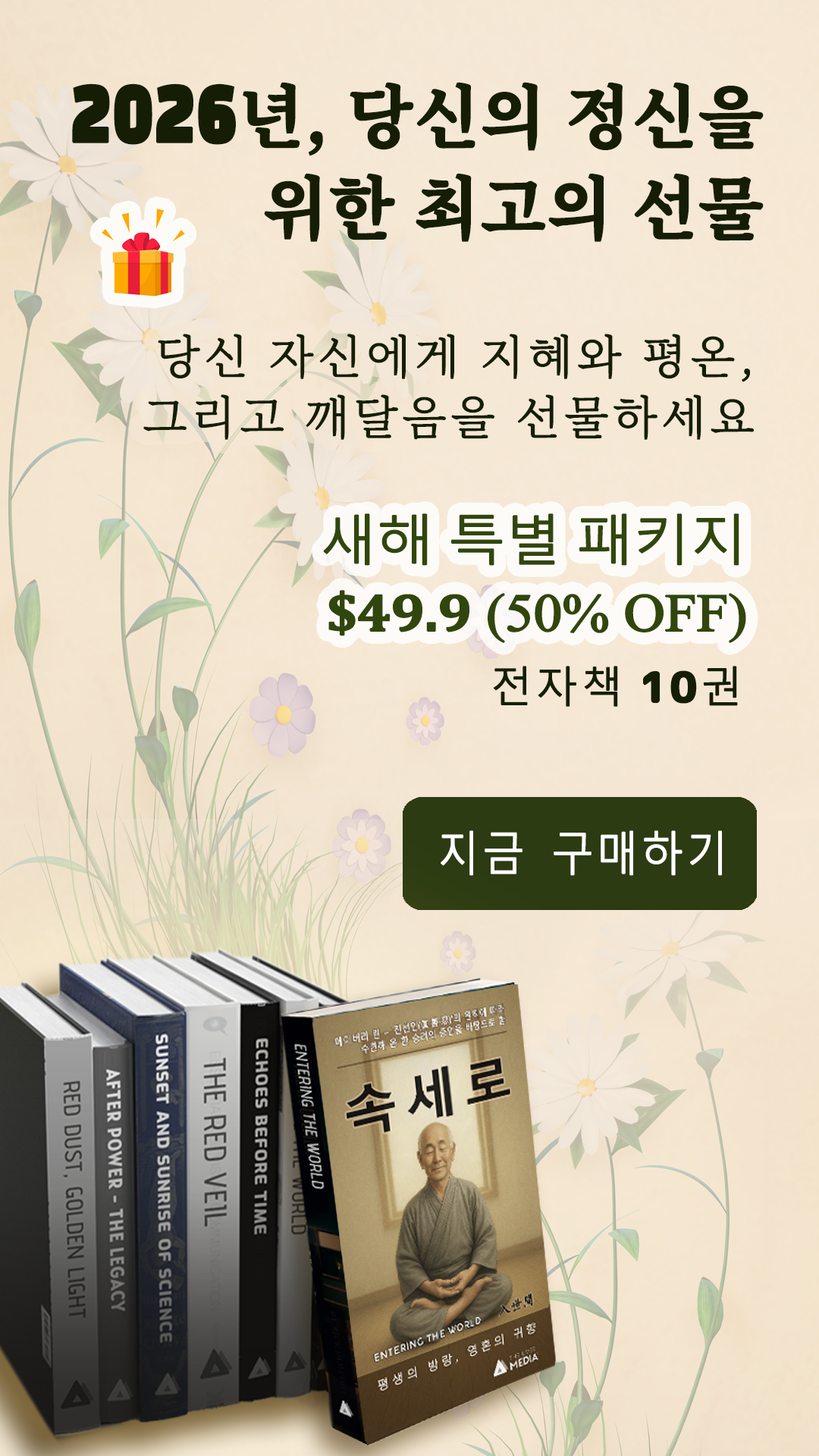
<style>
.page{position:relative;width:819px;height:1456px}
.page>*{position:absolute;margin:0}
.t1{font:68.2px/91.2px "NotoSerifKR-Bold";color:#151e05;font-weight:bold}
.t2{font:88.7px/91.2px "BlackHanSans-Regular";color:#151e05;font-weight:bold;scale:0.75 1}
.t3{font:45.5px/60.7px "NotoSerifKR-ExtraLight";letter-spacing:0.075em;color:#151e05;font-weight:bold}
.t4{font:53.2px/71px "MalgunGothic-Semilight";letter-spacing:-0.025em;color:#31460c;font-weight:bold;scale:1.07 1}
.t5{font:53.2px/71px "Cambria-Bold";letter-spacing:-0.025em;color:#31460c;font-weight:bold;scale:1.07 1}
.t6{font:53.2px/71px "TimesNewRomanPSMT";letter-spacing:-0.025em;color:#31460c;font-weight:bold;scale:1.07 1}
.t7{font:41.7px "MalgunGothic-Semilight";letter-spacing:0.05em;color:#151e05;font-weight:bold}
.t8{font:41.7px "RoundedMplus1c-ExtraBold";letter-spacing:0.05em;color:#151e05;font-weight:bold}
.t9{font:45.9px "MalgunGothic-Semilight";letter-spacing:0.05em;color:#ffffff;font-weight:bold;scale:0.91 1}
</style>
<div class="page">
<p class="t1" style="left:72px;top:82px;width:692px;height:160px;text-align:right"><span class="t2">2026</span>년, 당신의 정신을 위한 최고의 선물</p>
<p class="t3" style="left:143px;top:334px;width:612px;height:106px;text-align:right">당신 자신에게 지혜와 평온, 그리고 깨달음을 선물하세요</p>
<p class="t4" style="left:323px;top:513px;width:423px;height:130px;text-align:right">새해 특별 패키지<br> <span class="t5">$49.9</span><span class="t6"> (50% OFF)</span></p>
<p class="t7" style="left:494px;top:666px;width:244px;height:41px">전자책 <span class="t8">10</span>권</p>
<p class="t9" style="left:441px;top:830px;width:281px;height:46px">지금 구매하기</p>
</div>
